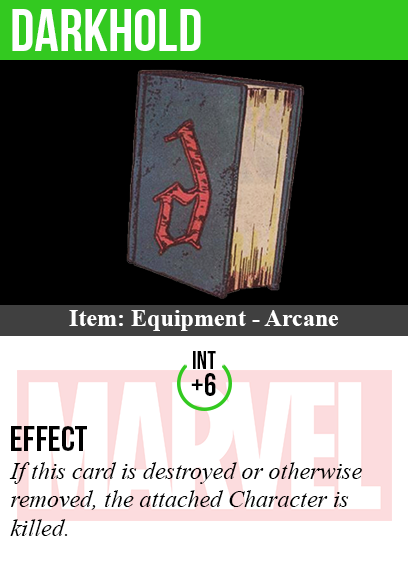
<style>
.page{position:relative;width:408px;height:585px;background:#ffffff}
.page>*{position:absolute;margin:0}
.t1{font:60px "BebasNeue";color:#ffffff}
.t2{font:24px "TimesNewRomanPS-BoldMT";color:#ffffff}
.t3{font:25px "BebasNeue";color:#000000}
.t4{font:32px "BebasNeue";color:#000000}
.t5{font:36px "BebasNeue";color:#000000}
.t6{font:24px "TimesNewRomanPS-ItalicMT";color:#000000}
</style>
<div class="page">
<p class="t1" style="left:12px;top:9px;width:189px;height:42px">darkhold</p>
<p class="t2" style="left:69px;top:310px;width:269px;height:21px">Item: Equipment - Arcane</p>
<p class="t3" style="left:193px;top:351px;width:23px;height:18px">int</p>
<p class="t4" style="left:191px;top:373px;width:25px;height:23px">+6</p>
<p class="t5" style="left:11px;top:426px;width:76px;height:25px">Effect</p>
<p class="t6" style="left:9px;top:462px;width:353px;height:74px">If this card is destroyed or otherwise<br>removed, the attached Character is<br>killed.</p>
</div>
